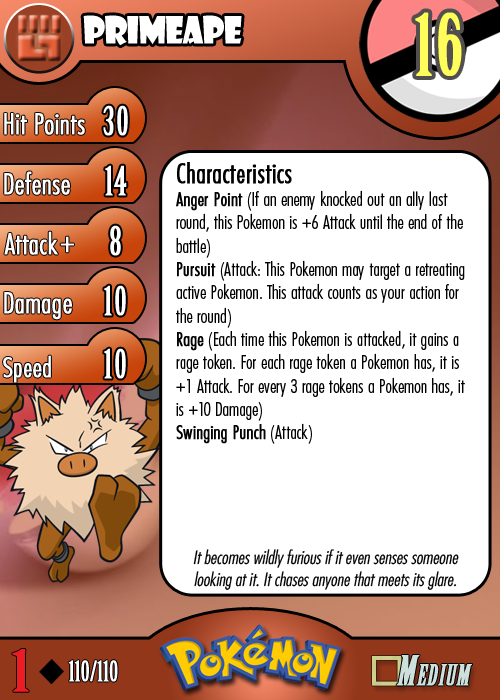
<style>
.page{position:relative;width:500px;height:700px;background:#ffffff}
.page>*{position:absolute;margin:0}
.t1{font:36.7px "ShowcardGothic-Reg";letter-spacing:-0.025em;color:#ffffff;scale:0.91 1}
.t2{font:83.3px "BirchStd";letter-spacing:0.025em;color:#fffd59;font-weight:bold}
.t3{font:27.8px "Futura-CondensedLight";color:#ffffff;font-weight:bold}
.t4{font:38.9px "BirchStd";letter-spacing:0.035em;color:#ffffff;font-weight:bold}
.t5{font:19.4px "FuturaCondensedBQ-Light";color:#010101}
.t6{font:27.8px "FuturaCondensedBQ-Light";color:#010101;font-weight:bold}
.t7{font:19.4px "FuturaCondensedBQ-Light";color:#010101;font-weight:bold}
.t8{font:30.6px "Futura-CondensedLight";color:#ffffff;font-weight:bold}
.t9{font:27.8px "FuturaCondensedBQ-Light";color:#ffffff;font-weight:bold}
.t10{font:18.1px "Futura-CondensedLight";color:#010101;font-style:italic}
.t11{font:55.6px "BirchStd";color:#ed1c24;font-weight:bold;scale:1.5 1}
.t12{font:27.8px "BirchStd";color:#ffffff;font-weight:bold}
</style>
<div class="page">
<p class="t1" style="left:83px;top:15px;width:159px;height:31px">primeape</p>
<p class="t2" style="left:415px;top:12px;width:47px;height:64px">16</p>
<p class="t3" style="left:4px;top:113px;width:81px;height:22px">Hit Points</p>
<p class="t4" style="left:103px;top:105px;width:25px;height:31px">30</p>
<p class="t3" style="left:4px;top:171px;width:66px;height:24px">Defense</p>
<p class="t4" style="left:105px;top:165px;width:22px;height:31px">14</p>
<p class="t5" style="left:176px;top:162px;width:289px;height:282px"><span class="t6">Characteristics<br></span><span class="t7">Anger Point</span> (If an enemy knocked out an ally last round, this Pokemon is +6 Attack until the end of the battle)<br><span class="t7">Pursuit</span> (Attack: This Pokemon may target a retreating active Pokemon. This attack counts as your action for the round)<br><span class="t7">Rage</span> (Each time this Pokemon is attacked, it gains a rage token. For each rage token a Pokemon has, it is +1 Attack. For every 3 rage tokens a Pokemon has, it is +10 Damage)<br><span class="t7">Swinging Punch</span> (Attack)</p>
<p class="t3" style="left:4px;top:231px;width:54px;height:24px">Attack</p>
<p class="t4" style="left:110px;top:225px;width:11px;height:31px">8</p>
<p class="t8" style="left:60px;top:236px;width:14px;height:17px">+</p>
<p class="t3" style="left:4px;top:292px;width:68px;height:28px">Damage</p>
<p class="t4" style="left:104px;top:285px;width:22px;height:31px">10</p>
<p class="t4" style="left:104px;top:348px;width:22px;height:31px">10</p>
<p class="t9" style="left:3px;top:355px;width:48px;height:28px">Speed</p>
<p class="t10" style="left:193px;top:549px;width:266px;height:41px;text-align:center">It becomes wildly furious if it even senses someone looking at it. It chases anyone that meets its glare.</p>
<p class="t11" style="left:12px;top:649px;width:17px;height:43px">1</p>
<p class="t12" style="left:68px;top:660px;width:50px;height:22px">110/110</p>
</div>
